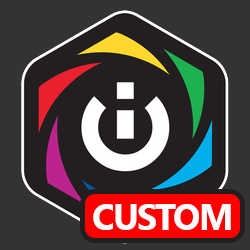
<style>
.page{position:relative;width:250px;height:250px;background:#333333}
.page>*{position:absolute;margin:0}
.t1{font:36px "SegoeUI-Bold";letter-spacing:-0.05em;color:#ffffff}
</style>
<div class="page">
<p class="t1" style="left:93px;top:204px;width:138px;height:26px">CUSTOM</p>
</div>
